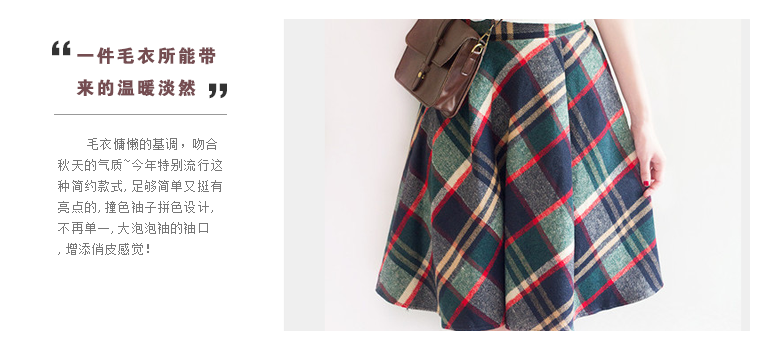
<style>
.page{position:relative;width:775px;height:350px;background:#ffffff}
.page>*{position:absolute;margin:0}
.t1{font:48px "FZCTHJW--GB1-0";letter-spacing:0.1em;color:#333333}
.t2{font:18px "FZDHTJW--GB1-0";letter-spacing:0.1em;color:#754d51;font-weight:bold}
.t3{font:59px "FZCTHJW--GB1-0";letter-spacing:0.1em;color:#333333}
.t4{font:12px "SimSun";letter-spacing:0.1em;color:#777777}
</style>
<div class="page">
<p class="t1" style="left:52px;top:40px;width:19px;height:16px">“</p>
<p class="t2" style="left:76px;top:47px;width:140px;height:50px">一件毛衣所能带<br>来的温暖淡然</p>
<p class="t1" style="left:209px;top:83px;width:18px;height:16px"><span class="t3"> </span>”</p>
<p class="t4" style="left:58px;top:138px;width:164px;height:117px">毛衣慵懒的基调，吻合<br>秋天的气质~今年特别流行这<br>种简约款式,足够简单又挺有<br>亮点的,撞色袖子拼色设计,<br>不再单一,大泡泡袖的袖口<br>,增添俏皮感觉！</p>
</div>
